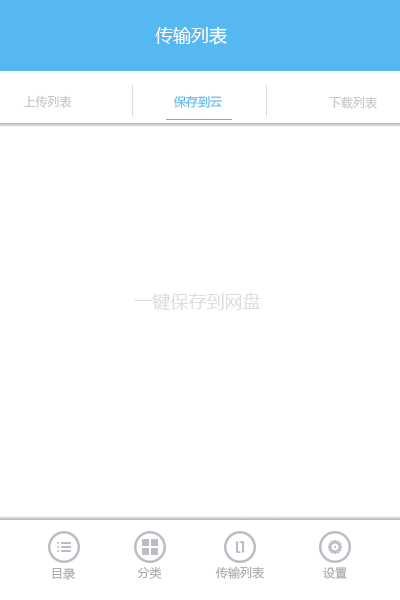
<style>
.page{position:relative;width:400px;height:600px;background:#ffffff}
.page>*{position:absolute;margin:0}
.t1{font:18px "MicrosoftYaHei";color:#ffffff}
.t2{font:12px "MicrosoftYaHei";color:#c7c7cd}
.t3{font:12px "MicrosoftYaHei";color:#55b8f1}
.t4{font:18px "MicrosoftYaHei";color:#dddde1}
.t5{font:12px "MicrosoftYaHei";color:#aaaaaa}
</style>
<div class="page">
<p class="t1" style="left:155px;top:27px;width:72px;height:18px">传输列表</p>
<p class="t2" style="left:23px;top:95px;width:49px;height:13px">上传列表</p>
<p class="t3" style="left:173px;top:95px;width:49px;height:13px">保存到云</p>
<p class="t2" style="left:329px;top:96px;width:48px;height:13px">下载列表</p>
<p class="t4" style="left:134px;top:292px;width:127px;height:19px">一键保存到网盘</p>
<p class="t5" style="left:52px;top:568px;width:23px;height:12px">目录</p>
<p class="t5" style="left:137px;top:566px;width:25px;height:13px">分类</p>
<p class="t5" style="left:215px;top:566px;width:49px;height:13px">传输列表</p>
<p class="t5" style="left:323px;top:567px;width:24px;height:12px">设置</p>
</div>
